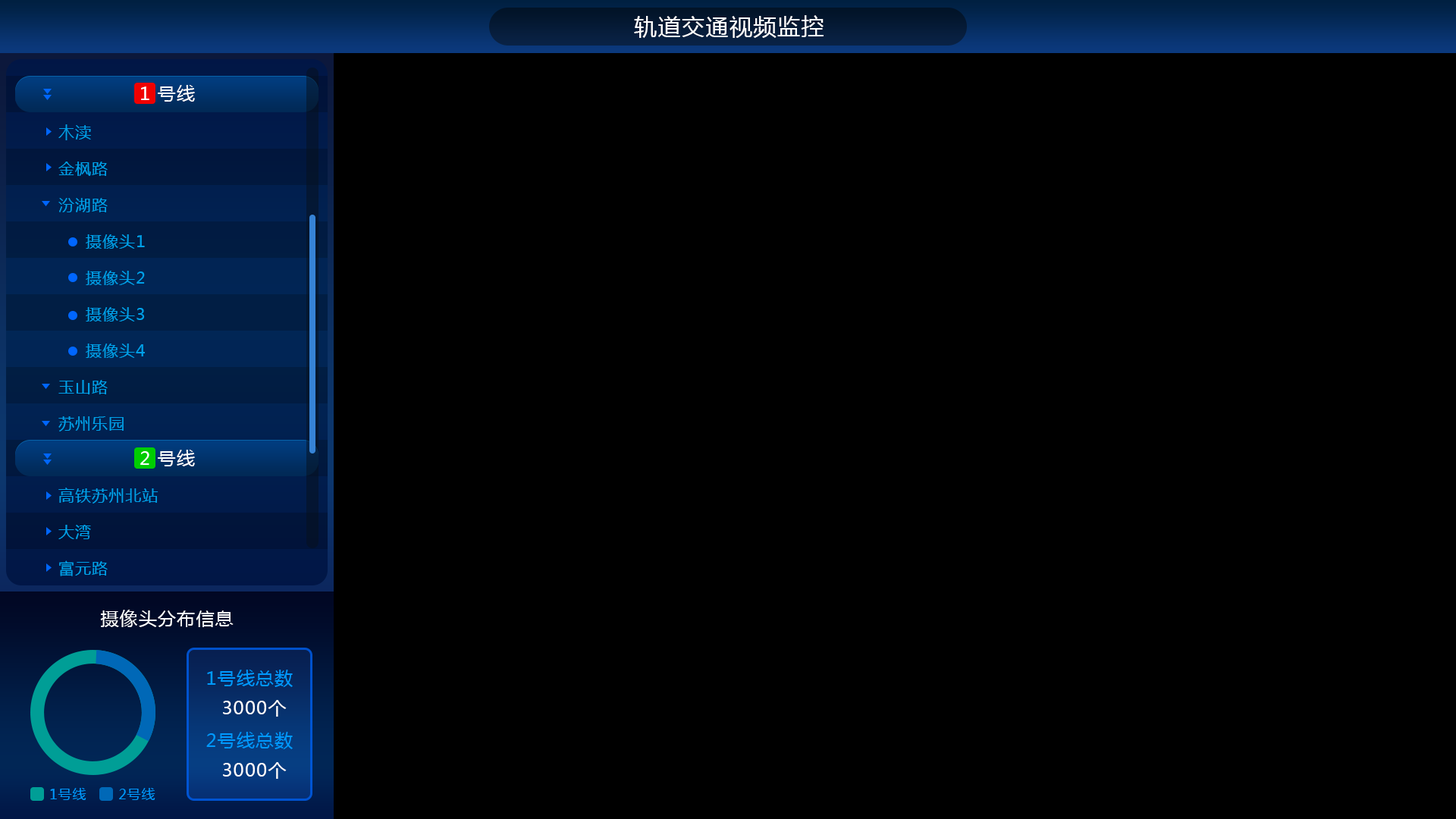
<style>
.page{position:relative;width:1456px;height:819px;background:#000000}
.page>*{position:absolute;margin:0}
.t1{font:22.7px "MicrosoftYaHei";letter-spacing:0.05em;color:#ffffff}
.t2{font:18.2px "MicrosoftYaHei";letter-spacing:0.05em;color:#ffffff}
.t3{font:15.9px/36.4px "MicrosoftYaHei";letter-spacing:0.05em;color:#00a0e9}
.t4{font:18.2px "MicrosoftYaHei";letter-spacing:0.05em;color:#0099ff}
.t5{font:13.6px "MicrosoftYaHei";letter-spacing:0.05em;color:#0099ff}
</style>
<div class="page">
<p class="t1" style="left:634px;top:15px;width:190px;height:23px">轨道交通视频监控</p>
<p class="t2" style="left:141px;top:85px;width:54px;height:17px">1 号线</p>
<p class="t3" style="left:58px;top:124px;width:87px;height:307px">木渎<br>金枫路<br>汾湖路<br> 摄像头1<br> 摄像头2<br> 摄像头3<br> 摄像头4<br>玉山路<br>苏州乐园</p>
<p class="t2" style="left:140px;top:450px;width:55px;height:16px">2 号线</p>
<p class="t3" style="left:58px;top:488px;width:100px;height:88px">高铁苏州北站<br>大湾<br>富元路</p>
<p class="t2" style="left:100px;top:610px;width:134px;height:17px">摄像头分布信息</p>
<p class="t4" style="left:207px;top:670px;width:86px;height:17px">1号线总数</p>
<p class="t2" style="left:223px;top:700px;width:64px;height:17px">3000个</p>
<p class="t4" style="left:206px;top:732px;width:87px;height:17px">2号线总数</p>
<p class="t2" style="left:223px;top:762px;width:64px;height:17px">3000个</p>
<p class="t5" style="left:50px;top:788px;width:36px;height:12px">1号线</p>
<p class="t5" style="left:119px;top:788px;width:36px;height:12px">2号线</p>
</div>
